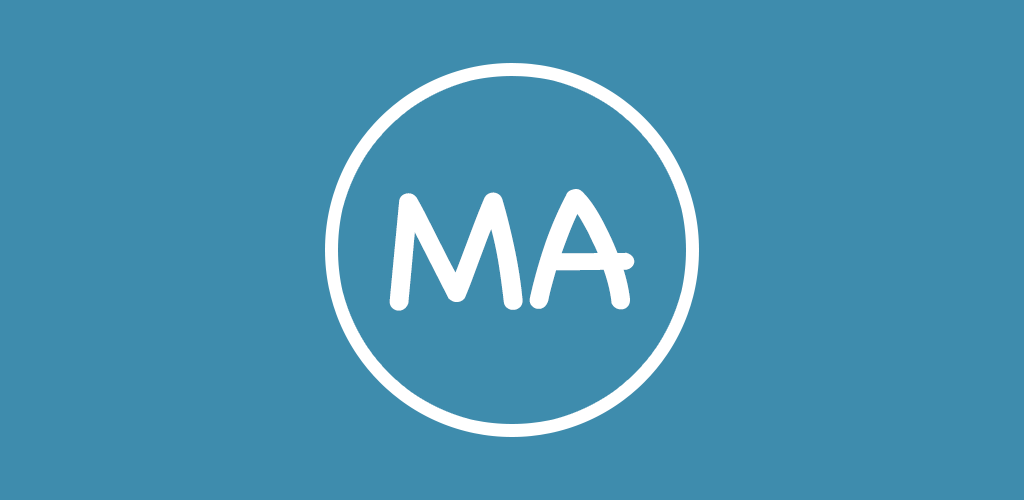
<style>
.page{position:relative;width:1024px;height:500px;background:#3e8cad}
.page>*{position:absolute;margin:0}
.t1{font:170.1px "ChalkboardSE-Regular";color:#ffffff}
</style>
<div class="page">
<p class="t1" style="left:389px;top:189px;width:246px;height:122px">MA</p>
</div>
